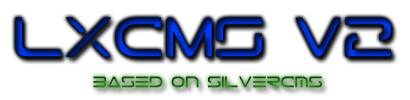
<style>
.page{position:relative;width:410px;height:100px;background:#ffffff}
.page>*{position:absolute;margin:0}
.t1{font:50px "Tele-Marines"}
.t2{font:14px "Tele-Marines"}
</style>
<div class="page">
<p class="t1" style="left:15px;top:17px;width:376px;height:39px">LxCMS v2</p>
<p class="t1" style="left:15px;top:18px;width:376px;height:39px">LxCMS v2</p>
<p class="t2" style="left:93px;top:76px;width:229px;height:12px">based on silvercms</p>
</div>
